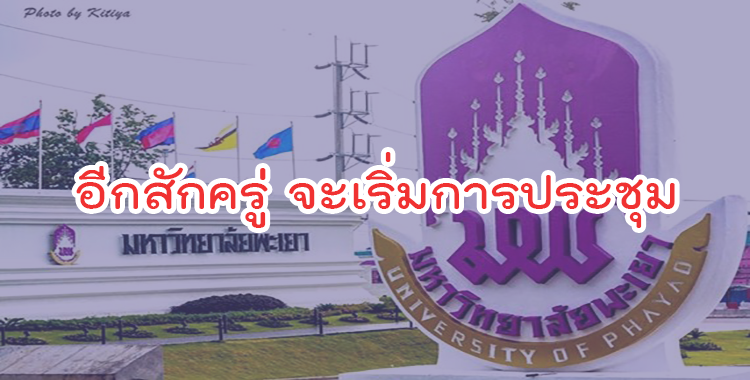
<style>
.page{position:relative;width:750px;height:380px;background:#aca9c8}
.page>*{position:absolute;margin:0}
.t1{font:64px "THKodchasal-Bold";color:#f03131}
</style>
<div class="page">
<p class="t1" style="left:76px;top:152px;width:599px;height:76px">อีกสักครู่ จะเริ่มการประชุม</p>
</div>
